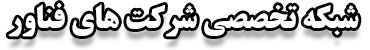
<style>
.page{position:relative;width:370px;height:50px;background:#ffffff}
.page>*{position:absolute;margin:0}
.t1{font:32px "2-TitrBold";color:#ffffff}
</style>
<div class="page">
<p class="t1" style="left:8px;top:3px;width:351px;height:34px">شبکه تخصصی شرکت های فناور</p>
</div>
